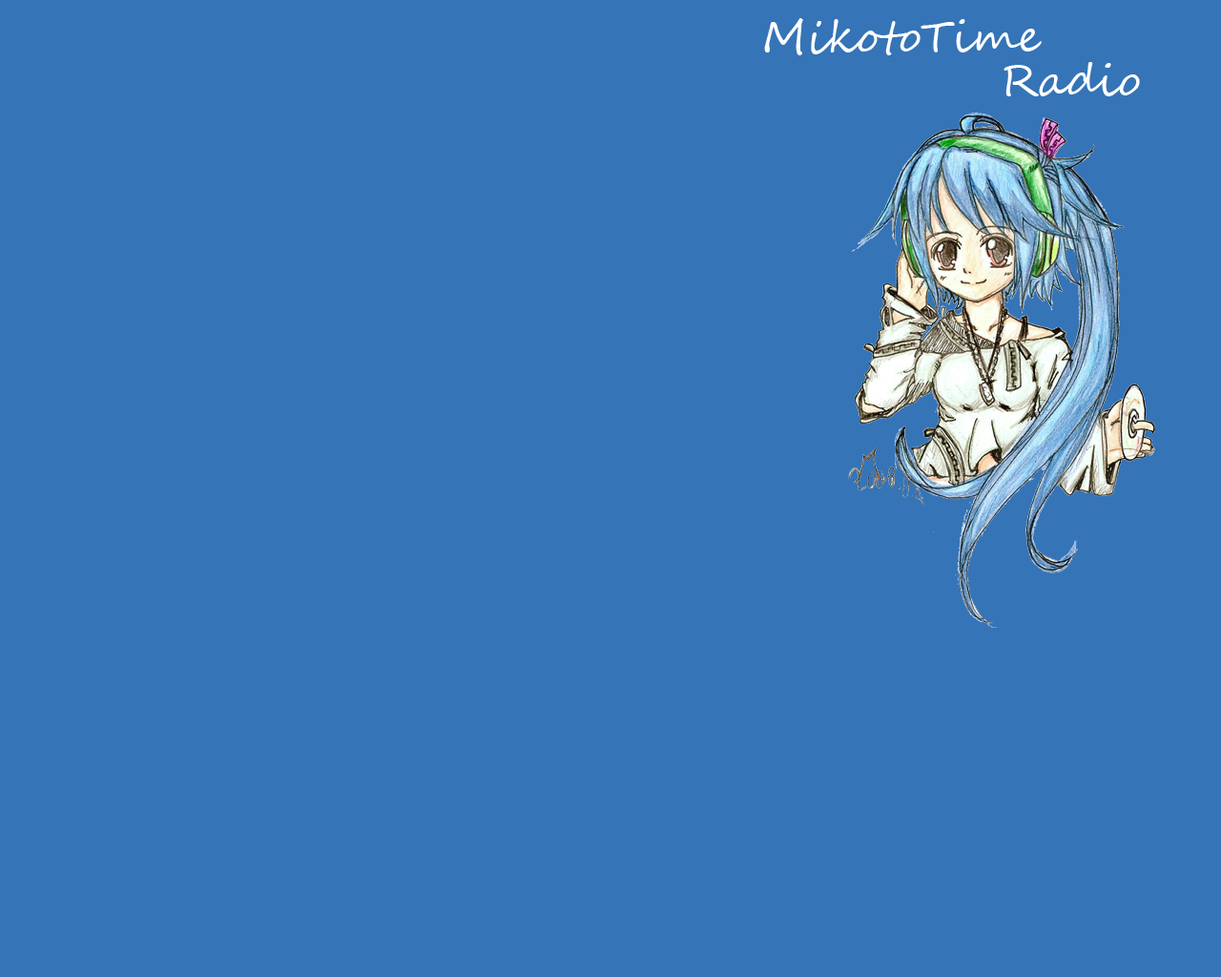
<style>
.page{position:relative;width:1221px;height:977px;background:#3574b7}
.page>*{position:absolute;margin:0}
.t1{font:43.7px "SegoeScript";color:#ffffff}
</style>
<div class="page">
<p class="t1" style="left:764px;top:18px;width:278px;height:37px">MikotoTime</p>
<p class="t1" style="left:1003px;top:62px;width:137px;height:34px">Radio</p>
</div>
